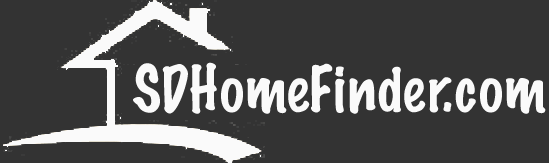
<style>
.page{position:relative;width:549px;height:163px;background:#333333}
.page>*{position:absolute;margin:0}
.t1{font:58px "MarkerFelt-Thin";letter-spacing:-0.005em;color:#fafafa}
</style>
<div class="page">
<p class="t1" style="left:133px;top:62px;width:413px;height:52px">SDHomeFinder.com</p>
</div>
